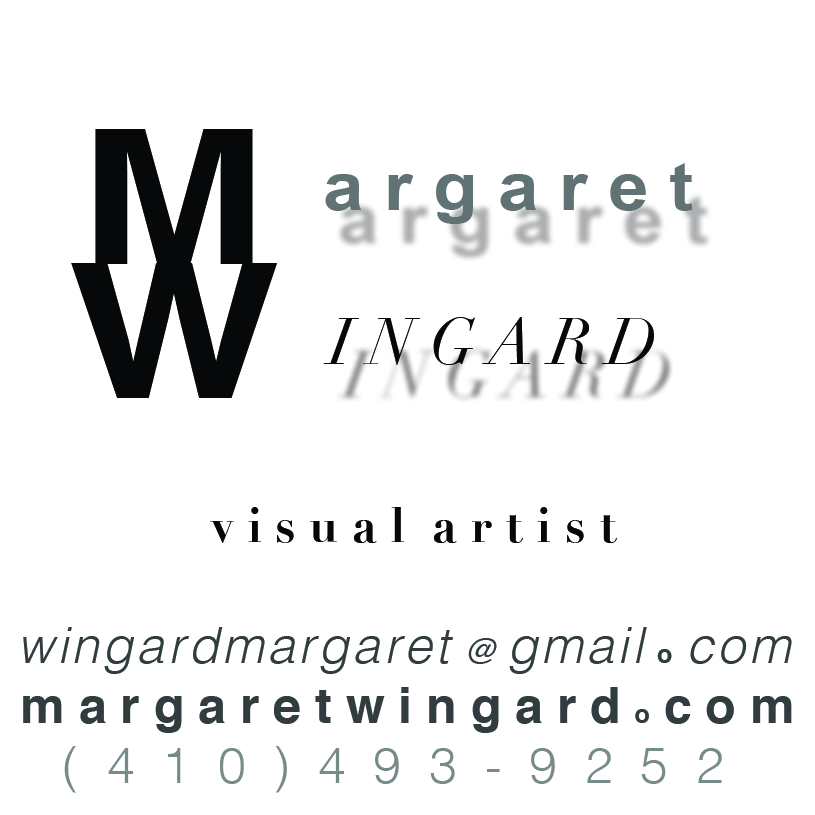
<style>
.page{position:relative;width:815px;height:815px;background:#ffffff}
.page>*{position:absolute;margin:0}
.t1{font:187.3px "Helvetica-Bold";color:#070809;scale:1.2 1}
.t2{font:66.7px "Arial-BoldMT";color:#607275;scale:1.1 1}
.t3{font:78.3px "Helvetica-Bold";color:#607275;scale:1.1 1}
.t4{font:186.9px "Helvetica-Bold";color:#070809;scale:1.2 1}
.t5{font:65.1px "Didot-Italic";color:#070809}
.t6{font:69.8px "Helvetica-Bold";color:#fefeff}
.t7{font:48.7px "Didot-Bold";color:#060808}
.t8{font:50px "Helvetica-Light";color:#798b8c}
.t9{font:12.5px "Helvetica-LightOblique";color:#313c3e}
.t10{font:50px "Helvetica-LightOblique";color:#313c3e}
.t11{font:33.3px "Helvetica-Oblique";color:#313c3e}
.t12{font:25px "Helvetica-Bold";color:#313c3e}
.t13{font:50px "Helvetica-Bold";color:#313c3e}
</style>
<div class="page">
<p class="t1" style="left:95px;top:129px;width:158px;height:135px">M</p>
<p class="t2" style="left:325px;top:163px;width:368px;height:61px"><span class="t3"> </span>a r g a r e t</p>
<p class="t4" style="left:71px;top:263px;width:207px;height:135px">W</p>
<p class="t5" style="left:323px;top:317px;width:331px;height:48px"><span class="t6"> <br> <br><br> <br></span>I N G A R D</p>
<p class="t7" style="left:210px;top:507px;width:407px;height:36px">v i s u a l  a r t i s t</p>
<p class="t8" style="left:23px;top:627px;width:769px;height:166px"><span class="t9">  </span><span class="t10">w i n g a r d m a r g a r e t </span><span class="t11">@ </span><span class="t10">g m a i l </span><span class="t12">o </span><span class="t10">c o m<br> </span><span class="t13">m a r g a r e t w i n g a r d </span><span class="t12">o</span><span class="t13"> c o m<br>    </span>(  4  1  0  )  4  9  3  -  9  2  5  2</p>
</div>
